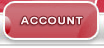
<style>
.page{position:relative;width:104px;height:48px}
.page>*{position:absolute;margin:0}
.t1{font:10.3px "Arial-BoldMT";letter-spacing:0.025em;color:#ffffff;scale:1.16 1}
</style>
<div class="page">
<p class="t1" style="left:20px;top:16px;width:63px;height:9px">ACCOUNT</p>
</div>
